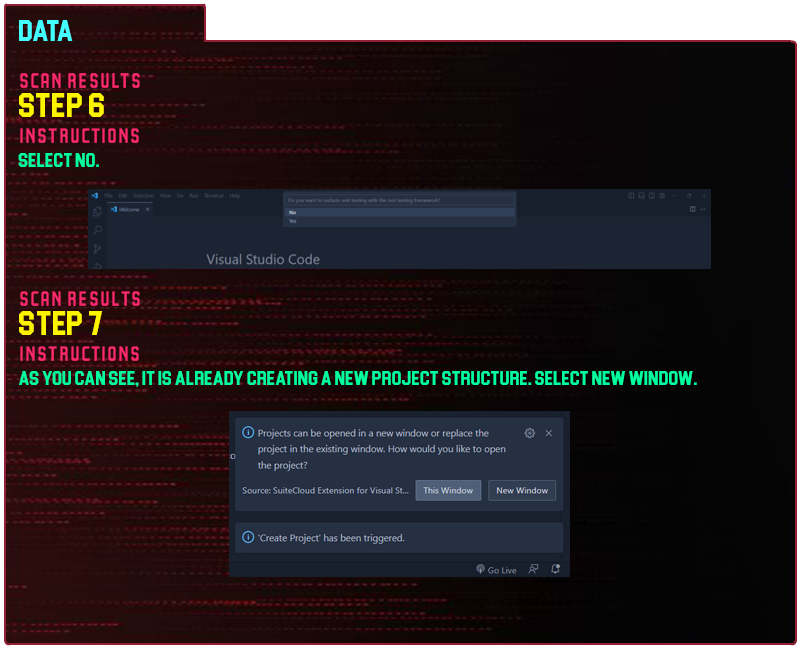
<style>
.page{position:relative;width:800px;height:650px}
.page>*{position:absolute;margin:0}
.t1{font:30px "Blockletter";color:#43ffff}
.t2{font:35px "Party-Lights-[WLM]-Flat";color:#ff296d}
.t3{font:35px "Blockletter";color:#fdf500}
.t4{font:20px "Blockletter";color:#00ff9f}
.t5{font:34.9px "Party-Lights-[WLM]-Flat";color:#ff296d}
.t6{font:34.9px "Blockletter";color:#fdf500}
.t7{font:19.9px "Blockletter";color:#00ff9f}
</style>
<div class="page">
<p class="t1" style="left:19px;top:20px;width:54px;height:21px">Data</p>
<p class="t2" style="left:20px;top:73px;width:120px;height:15px">Scan REsults</p>
<p class="t3" style="left:19px;top:93px;width:85px;height:24px">Step 6</p>
<p class="t2" style="left:20px;top:128px;width:119px;height:15px">instructions</p>
<p class="t4" style="left:18px;top:153px;width:81px;height:14px">Select no.</p>
<p class="t5" style="left:20px;top:291px;width:120px;height:15px">Scan REsults</p>
<p class="t6" style="left:19px;top:311px;width:84px;height:24px">Step 7</p>
<p class="t5" style="left:20px;top:346px;width:119px;height:15px">instructions</p>
<p class="t7" style="left:19px;top:371px;width:678px;height:16px">As you can see, it is already creating a new Project Structure. Select New Window.</p>
</div>
